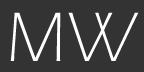
<style>
.page{position:relative;width:144px;height:72px;background:#333333}
.page>*{position:absolute;margin:0}
.t1{font:72px "ErasITC-Light";color:#ffffff}
</style>
<div class="page">
<p class="t1" style="left:10px;top:12px;width:129px;height:49px">MW</p>
</div>
